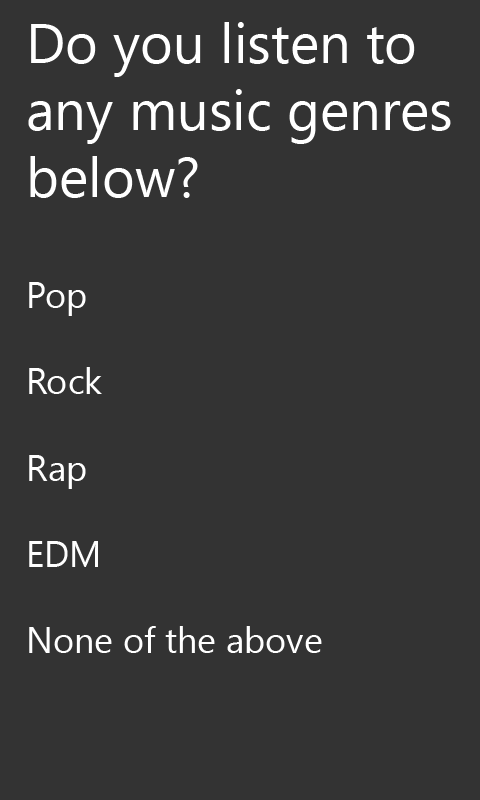
<style>
.page{position:relative;width:480px;height:800px;background:#333333}
.page>*{position:absolute;margin:0}
.t1{font:56px "SegoeUIHistoric";color:#ffffff}
.t2{font:36px "SegoeUIHistoric";color:#ffffff}
</style>
<div class="page">
<p class="t1" style="left:28px;top:22px;width:423px;height:631px">Do you listen to <br>any music genres<br>below?<br><br><span class="t2">Pop<br><br>Rock<br><br>Rap<br><br>EDM<br><br>None of the above</span></p>
</div>
